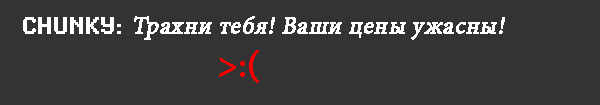
<style>
.page{position:relative;width:600px;height:105px;background:#333333}
.page>*{position:absolute;margin:0}
.t1{font:24px "MinionPro-Regular";color:#ffffff;font-weight:bold;font-style:italic}
.t2{font:24px "SynchroLET";color:#ffffff;font-weight:bold}
.t3{font:36px "MinionPro-Regular";color:#f50000;font-weight:bold}
</style>
<div class="page">
<p class="t1" style="left:23px;top:16px;width:482px;height:67px"><span class="t2">CHUNKY: </span>Трахни тебя! Ваши цены ужасны!<br>                                                                                                         <span class="t3">&gt;:(</span></p>
</div>
